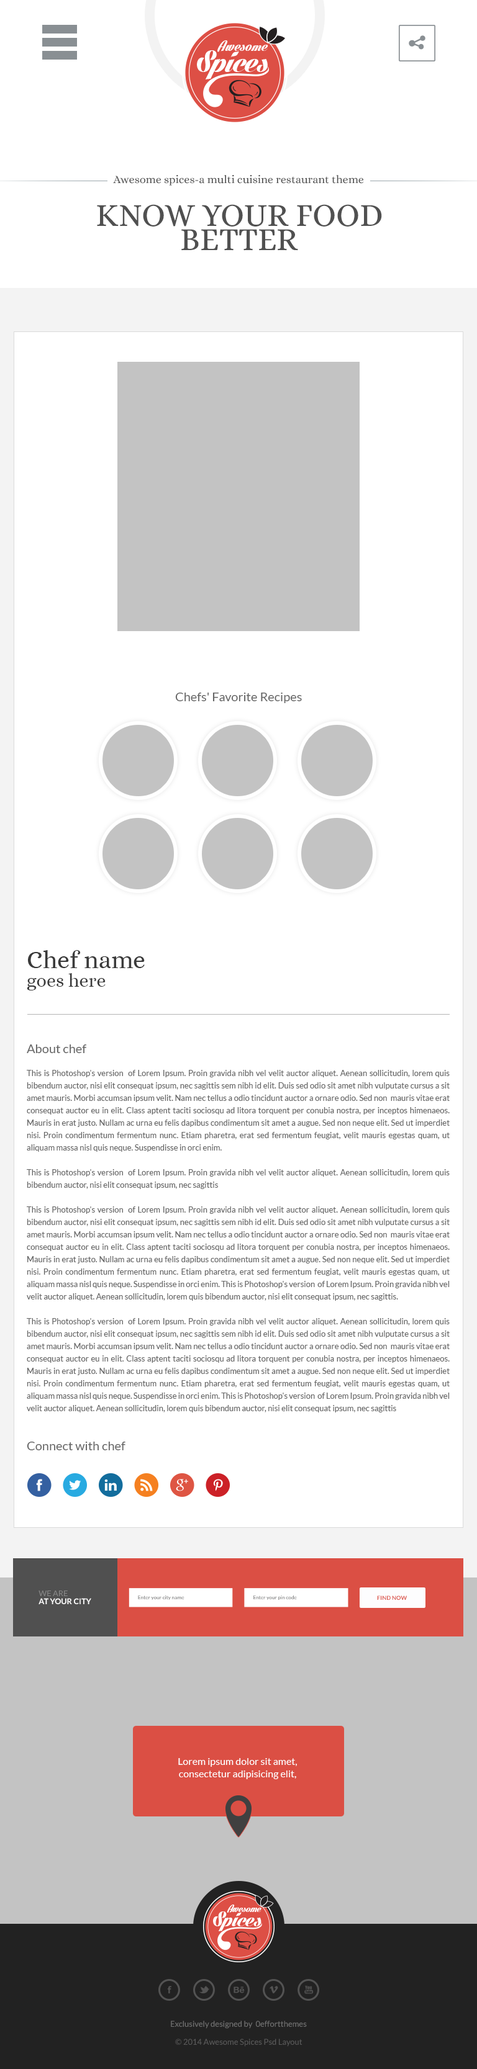
<style>
.page{position:relative;width:477px;height:2069px;background:#ffffff}
.page>*{position:absolute;margin:0}
.t1{font:11.2px "Alice-Regular";color:#505050}
.t2{font:32.5px/24.4px "Alice-Regular";color:#505050;text-transform:uppercase}
.t3{font:12.4px "Lato-Regular";color:#666666}
.t4{font:24.8px/18.6px "Alice-Regular";color:#3a3a3a}
.t5{font:18.6px/18.6px "Alice-Regular";color:#3a3a3a}
.t6{font:8.1px/12.4px "Lato-Regular";color:#666666}
.t7{font:7.9px/7.9px "Lato-Bold";color:#ffffff;text-transform:uppercase}
.t8{font:7.9px/7.9px "Lato-Regular";color:#888888;text-transform:uppercase}
.t9{font:5.1px "Lato-Regular";color:#888888}
.t10{font:5.7px "Lato-Bold";color:#db4f44;text-transform:uppercase}
.t11{font:9.9px/12.4px "Lato-Regular";color:#ffffff}
.t12{font:8.1px "Lato-Regular";color:#737373}
.t13{font:8.1px "Lato-Regular";color:#5a5a5a}
</style>
<div class="page">
<p class="t1" style="left:113px;top:175px;width:251px;height:11px">Awesome spices-a multi cuisine restaurant theme</p>
<p class="t2" style="left:97px;top:204px;width:285px;height:47px;text-align:center">Know your food<br>better</p>
<p class="t3" style="left:175px;top:693px;width:127px;height:10px">Chefs' Favorite Recipes</p>
<p class="t4" style="left:27px;top:950px;width:118px;height:41px">Chef name<br><span class="t5">goes here</span></p>
<p class="t3" style="left:27px;top:1045px;width:59px;height:8px">About chef</p>
<p class="t6" style="left:27px;top:1070px;width:422px;height:343px;text-align:justify">This is Photoshop's version  of Lorem Ipsum. Proin gravida nibh vel velit auctor aliquet. Aenean sollicitudin, lorem quis bibendum auctor, nisi elit consequat ipsum, nec sagittis sem nibh id elit. Duis sed odio sit amet nibh vulputate cursus a sit amet mauris. Morbi accumsan ipsum velit. Nam nec tellus a odio tincidunt auctor a ornare odio. Sed non  mauris vitae erat consequat auctor eu in elit. Class aptent taciti sociosqu ad litora torquent per conubia nostra, per inceptos himenaeos. Mauris in erat justo. Nullam ac urna eu felis dapibus condimentum sit amet a augue. Sed non neque elit. Sed ut imperdiet nisi. Proin condimentum fermentum nunc. Etiam pharetra, erat sed fermentum feugiat, velit mauris egestas quam, ut aliquam massa nisl quis neque. Suspendisse in orci enim.<br><br>This is Photoshop's version  of Lorem Ipsum. Proin gravida nibh vel velit auctor aliquet. Aenean sollicitudin, lorem quis bibendum auctor, nisi elit consequat ipsum, nec sagittis<br><br>This is Photoshop's version  of Lorem Ipsum. Proin gravida nibh vel velit auctor aliquet. Aenean sollicitudin, lorem quis bibendum auctor, nisi elit consequat ipsum, nec sagittis sem nibh id elit. Duis sed odio sit amet nibh vulputate cursus a sit amet mauris. Morbi accumsan ipsum velit. Nam nec tellus a odio tincidunt auctor a ornare odio. Sed non  mauris vitae erat consequat auctor eu in elit. Class aptent taciti sociosqu ad litora torquent per conubia nostra, per inceptos himenaeos. Mauris in erat justo. Nullam ac urna eu felis dapibus condimentum sit amet a augue. Sed non neque elit. Sed ut imperdiet nisi. Proin condimentum fermentum nunc. Etiam pharetra, erat sed fermentum feugiat, velit mauris egestas quam, ut aliquam massa nisl quis neque. Suspendisse in orci enim. This is Photoshop's version  of Lorem Ipsum. Proin gravida nibh vel velit auctor aliquet. Aenean sollicitudin, lorem quis bibendum auctor, nisi elit consequat ipsum, nec sagittis.<br><br>This is Photoshop's version  of Lorem Ipsum. Proin gravida nibh vel velit auctor aliquet. Aenean sollicitudin, lorem quis bibendum auctor, nisi elit consequat ipsum, nec sagittis sem nibh id elit. Duis sed odio sit amet nibh vulputate cursus a sit amet mauris. Morbi accumsan ipsum velit. Nam nec tellus a odio tincidunt auctor a ornare odio. Sed non  mauris vitae erat consequat auctor eu in elit. Class aptent taciti sociosqu ad litora torquent per conubia nostra, per inceptos himenaeos. Mauris in erat justo. Nullam ac urna eu felis dapibus condimentum sit amet a augue. Sed non neque elit. Sed ut imperdiet nisi. Proin condimentum fermentum nunc. Etiam pharetra, erat sed fermentum feugiat, velit mauris egestas quam, ut aliquam massa nisl quis neque. Suspendisse in orci enim. This is Photoshop's version  of Lorem Ipsum. Proin gravida nibh vel velit auctor aliquet. Aenean sollicitudin, lorem quis bibendum auctor, nisi elit consequat ipsum, nec sagittis</p>
<p class="t3" style="left:27px;top:1442px;width:98px;height:9px">Connect with chef</p>
<p class="t7" style="left:38px;top:1591px;width:53px;height:13px"><span class="t8">we are<br></span>at your city</p>
<p class="t9" style="left:138px;top:1596px;width:46px;height:4px">Enter your city name</p>
<p class="t9" style="left:253px;top:1596px;width:44px;height:4px">Enter your pin code</p>
<p class="t10" style="left:377px;top:1596px;width:30px;height:4px">find Now</p>
<p class="t11" style="left:178px;top:1758px;width:119px;height:22px;text-align:center">Lorem ipsum dolor sit amet, consectetur adipisicing elit,</p>
<p class="t12" style="left:171px;top:2021px;width:136px;height:8px">Exclusively designed by  0effortthemes</p>
<p class="t13" style="left:175px;top:2039px;width:127px;height:8px">© 2014 Awesome Spices Psd Layout</p>
</div>
